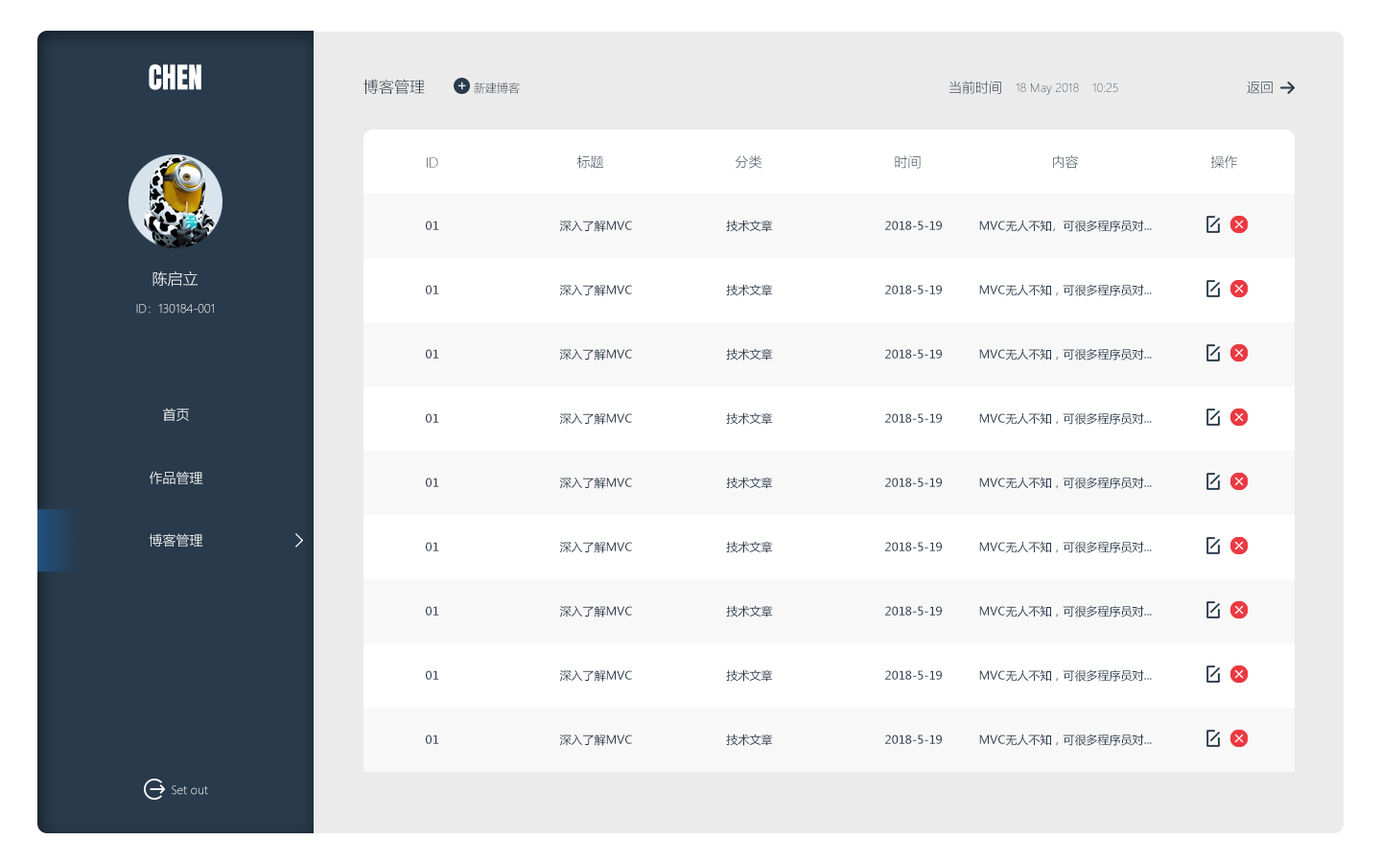
<style>
.page{position:relative;width:1381px;height:863px;background:#ffffff}
.page>*{position:absolute;margin:0}
.t1{font:28.8px "Anton-Regular";color:#ffffff}
.t2{font:15.3px "MicrosoftYaHeiLight";color:#283a4c}
.t3{font:11.5px "MicrosoftYaHeiLight"}
.t4{font:13.4px "MicrosoftYaHeiLight"}
.t5{font:11.5px "MicrosoftYaHeiLight";color:#283a4c}
.t6{font:13.4px "MicrosoftYaHeiLight";color:#283a4c}
.t7{font:11.5px "MicrosoftYaHei";color:#283a4c}
.t8{font:15.3px "MicrosoftYaHeiLight";color:#ffffff}
.t9{font:13.4px "MicrosoftYaHeiLight";color:#ffffff}
</style>
<div class="page">
<p class="t1" style="left:149px;top:64px;width:52px;height:26px">CHEN</p>
<p class="t2" style="left:364px;top:79px;width:61px;height:15px">博客管理</p>
<p class="t3" style="left:474px;top:82px;width:46px;height:12px">新建博客</p>
<p class="t4" style="left:950px;top:81px;width:51px;height:13px">当前时间</p>
<p class="t5" style="left:1016px;top:82px;width:63px;height:13px">18 May 2018</p>
<p class="t3" style="left:1093px;top:82px;width:25px;height:10px">10:25</p>
<p class="t4" style="left:1247px;top:81px;width:26px;height:13px">返回</p>
<p class="t4" style="left:427px;top:157px;width:11px;height:11px">ID</p>
<p class="t4" style="left:576px;top:155px;width:27px;height:14px">标题</p>
<p class="t4" style="left:736px;top:155px;width:26px;height:14px">分类</p>
<p class="t4" style="left:895px;top:155px;width:26px;height:14px">时间</p>
<p class="t4" style="left:1053px;top:155px;width:25px;height:14px">内容</p>
<p class="t6" style="left:1211px;top:155px;width:26px;height:14px">操作</p>
<p class="t7" style="left:426px;top:221px;width:13px;height:9px">01</p>
<p class="t7" style="left:559px;top:221px;width:73px;height:11px">深入了解MVC</p>
<p class="t7" style="left:726px;top:220px;width:47px;height:12px">技术文章</p>
<p class="t7" style="left:885px;top:221px;width:57px;height:9px">2018-5-19</p>
<p class="t7" style="left:979px;top:220px;width:173px;height:12px">MVC无人不知，可很多程序员对...</p>
<p class="t8" style="left:153px;top:271px;width:45px;height:16px">陈启立</p>
<p class="t7" style="left:426px;top:285px;width:13px;height:9px">01</p>
<p class="t7" style="left:559px;top:285px;width:73px;height:11px">深入了解MVC</p>
<p class="t7" style="left:726px;top:284px;width:47px;height:12px">技术文章</p>
<p class="t7" style="left:885px;top:285px;width:57px;height:9px">2018-5-19</p>
<p class="t7" style="left:979px;top:284px;width:173px;height:12px">MVC无人不知，可很多程序员对...</p>
<p class="t3" style="left:136px;top:304px;width:78px;height:10px">ID：130184-001</p>
<p class="t7" style="left:426px;top:349px;width:13px;height:10px">01</p>
<p class="t7" style="left:559px;top:349px;width:73px;height:12px">深入了解MVC</p>
<p class="t7" style="left:726px;top:348px;width:47px;height:13px">技术文章</p>
<p class="t7" style="left:885px;top:349px;width:57px;height:10px">2018-5-19</p>
<p class="t7" style="left:979px;top:348px;width:173px;height:13px">MVC无人不知，可很多程序员对...</p>
<p class="t4" style="left:163px;top:408px;width:26px;height:13px">首页</p>
<p class="t7" style="left:426px;top:413px;width:13px;height:10px">01</p>
<p class="t7" style="left:559px;top:413px;width:73px;height:12px">深入了解MVC</p>
<p class="t7" style="left:726px;top:412px;width:47px;height:13px">技术文章</p>
<p class="t7" style="left:885px;top:413px;width:57px;height:10px">2018-5-19</p>
<p class="t7" style="left:979px;top:412px;width:173px;height:13px">MVC无人不知，可很多程序员对...</p>
<p class="t9" style="left:150px;top:471px;width:53px;height:13px">作品管理</p>
<p class="t7" style="left:426px;top:478px;width:13px;height:9px">01</p>
<p class="t7" style="left:559px;top:478px;width:73px;height:11px">深入了解MVC</p>
<p class="t7" style="left:726px;top:477px;width:47px;height:12px">技术文章</p>
<p class="t7" style="left:885px;top:478px;width:57px;height:9px">2018-5-19</p>
<p class="t7" style="left:979px;top:477px;width:173px;height:12px">MVC无人不知，可很多程序员对...</p>
<p class="t9" style="left:149px;top:533px;width:54px;height:14px">博客管理</p>
<p class="t7" style="left:426px;top:542px;width:13px;height:10px">01</p>
<p class="t7" style="left:559px;top:542px;width:73px;height:11px">深入了解MVC</p>
<p class="t7" style="left:726px;top:541px;width:47px;height:12px">技术文章</p>
<p class="t7" style="left:885px;top:542px;width:57px;height:10px">2018-5-19</p>
<p class="t7" style="left:979px;top:541px;width:173px;height:12px">MVC无人不知，可很多程序员对...</p>
<p class="t7" style="left:726px;top:605px;width:47px;height:13px">技术文章</p>
<p class="t7" style="left:979px;top:605px;width:173px;height:13px">MVC无人不知，可很多程序员对...</p>
<p class="t7" style="left:426px;top:606px;width:13px;height:10px">01</p>
<p class="t7" style="left:559px;top:606px;width:73px;height:12px">深入了解MVC</p>
<p class="t7" style="left:885px;top:606px;width:57px;height:10px">2018-5-19</p>
<p class="t7" style="left:426px;top:670px;width:13px;height:10px">01</p>
<p class="t7" style="left:559px;top:670px;width:73px;height:12px">深入了解MVC</p>
<p class="t7" style="left:726px;top:670px;width:47px;height:12px">技术文章</p>
<p class="t7" style="left:885px;top:670px;width:57px;height:10px">2018-5-19</p>
<p class="t7" style="left:979px;top:670px;width:173px;height:12px">MVC无人不知，可很多程序员对...</p>
<p class="t7" style="left:426px;top:735px;width:13px;height:9px">01</p>
<p class="t7" style="left:559px;top:735px;width:73px;height:11px">深入了解MVC</p>
<p class="t7" style="left:726px;top:734px;width:47px;height:12px">技术文章</p>
<p class="t7" style="left:885px;top:735px;width:57px;height:9px">2018-5-19</p>
<p class="t7" style="left:979px;top:734px;width:173px;height:12px">MVC无人不知，可很多程序员对...</p>
<p class="t3" style="left:172px;top:786px;width:36px;height:9px">Set out</p>
</div>
